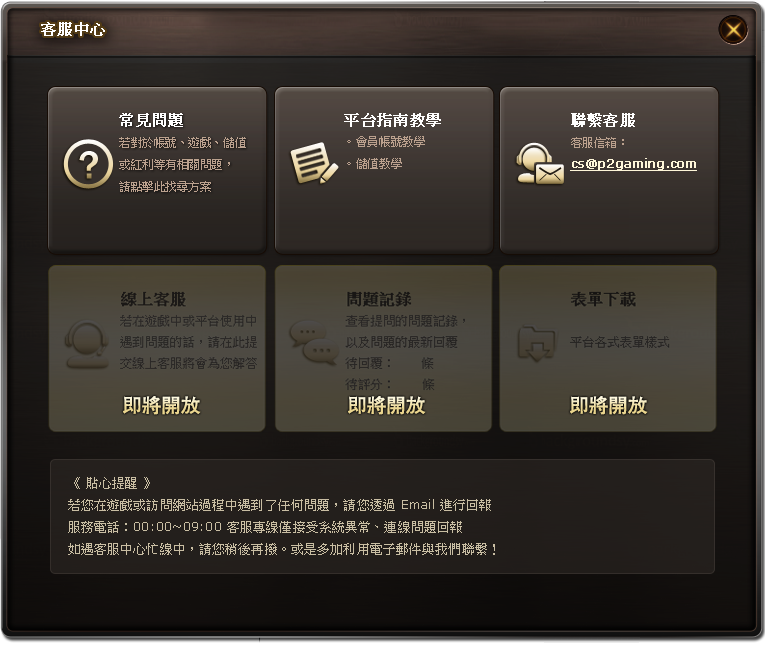
<style>
.page{position:relative;width:765px;height:650px}
.page>*{position:absolute;margin:0}
.t1{font:15px "PMingLiU";letter-spacing:0.01em;color:#ffffff;font-weight:bold}
.t2{font:12px/22px "PMingLiU";color:#bba18e}
.t3{font:15px/23.1px "PMingLiU";color:#ffffff;font-weight:bold}
.t4{font:12px/21.2px "PMingLiU";color:#bba18e}
.t5{font:12px/21.2px "Verdana";color:#fef7d9;font-weight:bold;text-decoration:underline}
.t6{font:40.8px "FranklinGothic-Medium"}
.t7{font:13px/22px "PMingLiU";letter-spacing:0.01em;color:#c9bea3}
.t8{font:13px/22px "Verdana";letter-spacing:0.01em;color:#c9bea3}
</style>
<div class="page">
<p class="t1" style="left:41px;top:22px;width:64px;height:14px">客服中心</p>
<p class="t2" style="left:119px;top:113px;width:127px;height:79px"><span class="t3">常見問題<br></span>若對於帳號、遊戲、儲值<br>或紅利等有相關問題，<br>請點擊此找尋方案</p>
<p class="t4" style="left:344px;top:113px;width:97px;height:56px"><span class="t3">平台指南教學<br></span>。會員帳號教學<br>。儲值教學</p>
<p class="t5" style="left:570px;top:113px;width:127px;height:58px"><span class="t3">聯繫客服<br></span><span class="t4">客服信箱：<br></span>cs@p2gaming.com</p>
<p class="t6" style="left:79px;top:151px;width:19px;height:28px">?</p>
<p class="t7" style="left:68px;top:477px;width:427px;height:78px">《 貼心提醒 》<br>若您在遊戲或訪問網站過程中遇到了任何問題，請您透過<span class="t8"> Email </span>進行回報<br>服務電話：<span class="t8">00:00~09:00 </span>客服專線僅接受系統異常、連線問題回報<br>如遇客服中心忙線中，請您稍後再撥。或是多加利用電子郵件與我們聯繫！</p>
</div>
